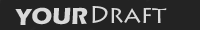
<style>
.page{position:relative;width:200px;height:30px;background:#232323}
.page>*{position:absolute;margin:0}
.t1{font:24px "LithosPro-Regular";color:#d9d9d9}
.t2{font:24px "ErasITC-Bold";color:#d9d9d9}
</style>
<div class="page">
<p class="t1" style="left:92px;top:6px;width:75px;height:17px">Draft</p>
<p class="t2" style="left:15px;top:7px;width:73px;height:18px">YOUR</p>
</div>
